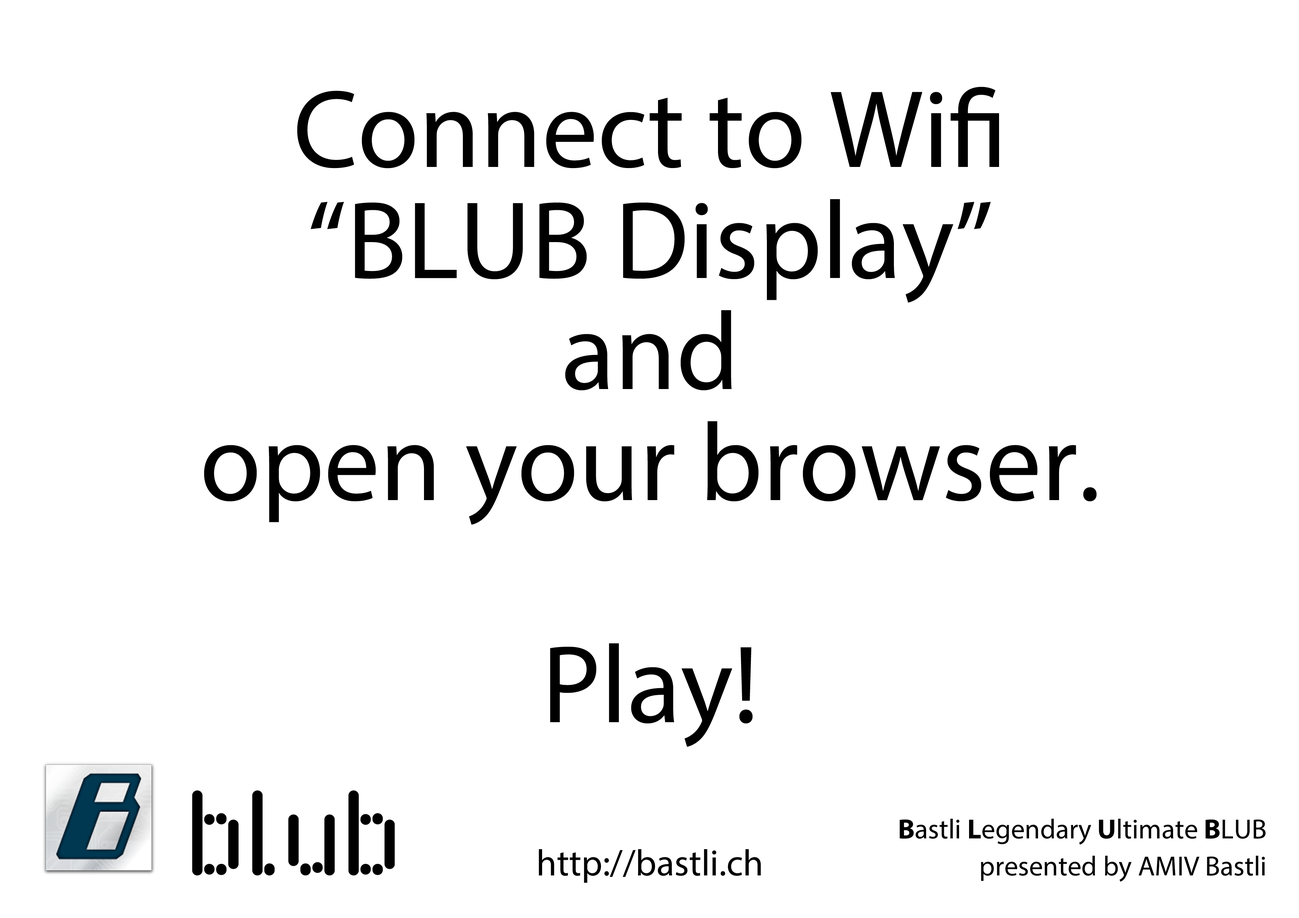
<style>
.page{position:relative;width:1299px;height:918px;background:#ffffff}
.page>*{position:absolute;margin:0}
.t1{font:111.1px/111.1px "MyriadPro-Regular";color:#000000}
.t2{font:27.8px/37px "MyriadPro-Regular";color:#000000}
.t3{font:27.8px/37px "MyriadPro-Bold";color:#000000}
.t4{font:37px "MyriadPro-Regular";color:#000000}
</style>
<div class="page">
<p class="t1" style="left:204px;top:87px;width:893px;height:660px;text-align:center">Connect to Wifi <br>“BLUB Display” <br>and <br>open your browser.<br><br>Play!</p>
<p class="t2" style="left:899px;top:819px;width:366px;height:63px;text-align:right"><span class="t3">B</span>astli <span class="t3">L</span>egendary <span class="t3">U</span>ltimate <span class="t3">B</span>LUB <br>presented by AMIV Bastli</p>
<p class="t4" style="left:539px;top:849px;width:222px;height:34px">http://bastli.ch</p>
</div>
